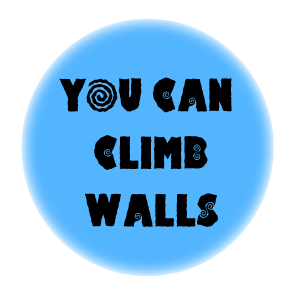
<style>
.page{position:relative;width:300px;height:300px;background:#ffffff}
.page>*{position:absolute;margin:0}
.t1{font:48px "HippoCritic";color:#000000}
</style>
<div class="page">
<p class="t1" style="left:59px;top:77px;width:173px;height:150px;text-align:center">YOU CAN <br>CLIMB<br>WALLS</p>
</div>
